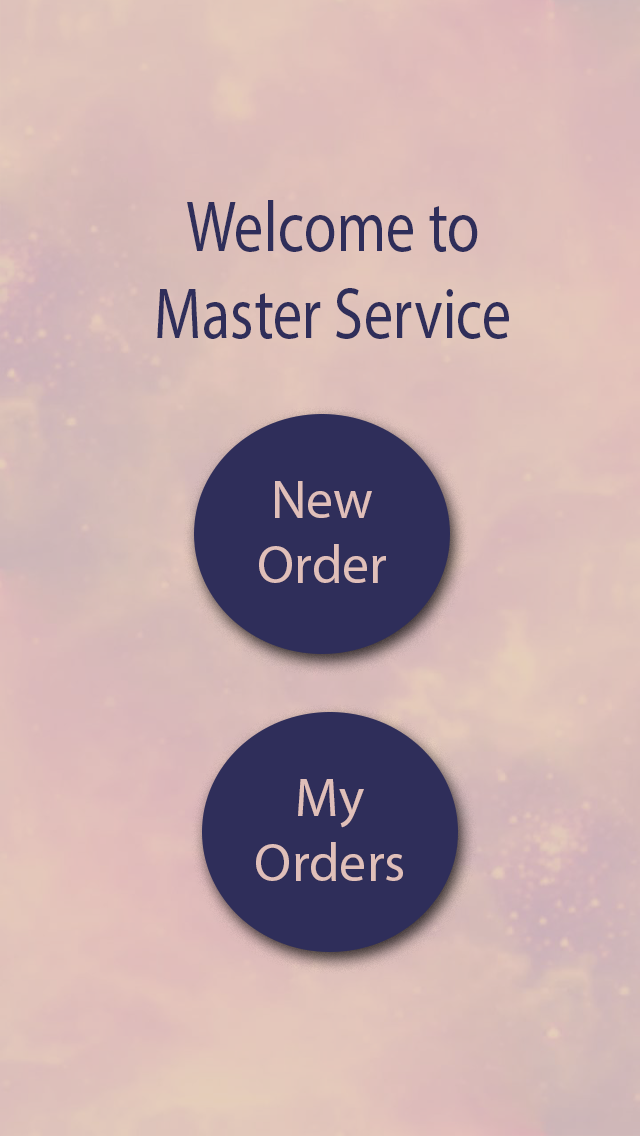
<style>
.page{position:relative;width:640px;height:1136px}
.page>*{position:absolute;margin:0}
.t1{font:72px "MyriadPro-Regular";color:#2f2e5a;scale:0.82 1}
.t2{font:54.2px "MyriadPro-Regular";color:#e0bfb9}
</style>
<div class="page">
<p class="t1" style="left:157px;top:200px;width:352px;height:139px;text-align:center">Welcome to<br>Master Service</p>
<p class="t2" style="left:259px;top:481px;width:127px;height:102px;text-align:center">New<br>Order</p>
<p class="t2" style="left:256px;top:779px;width:147px;height:102px;text-align:center">My<br>Orders</p>
</div>
